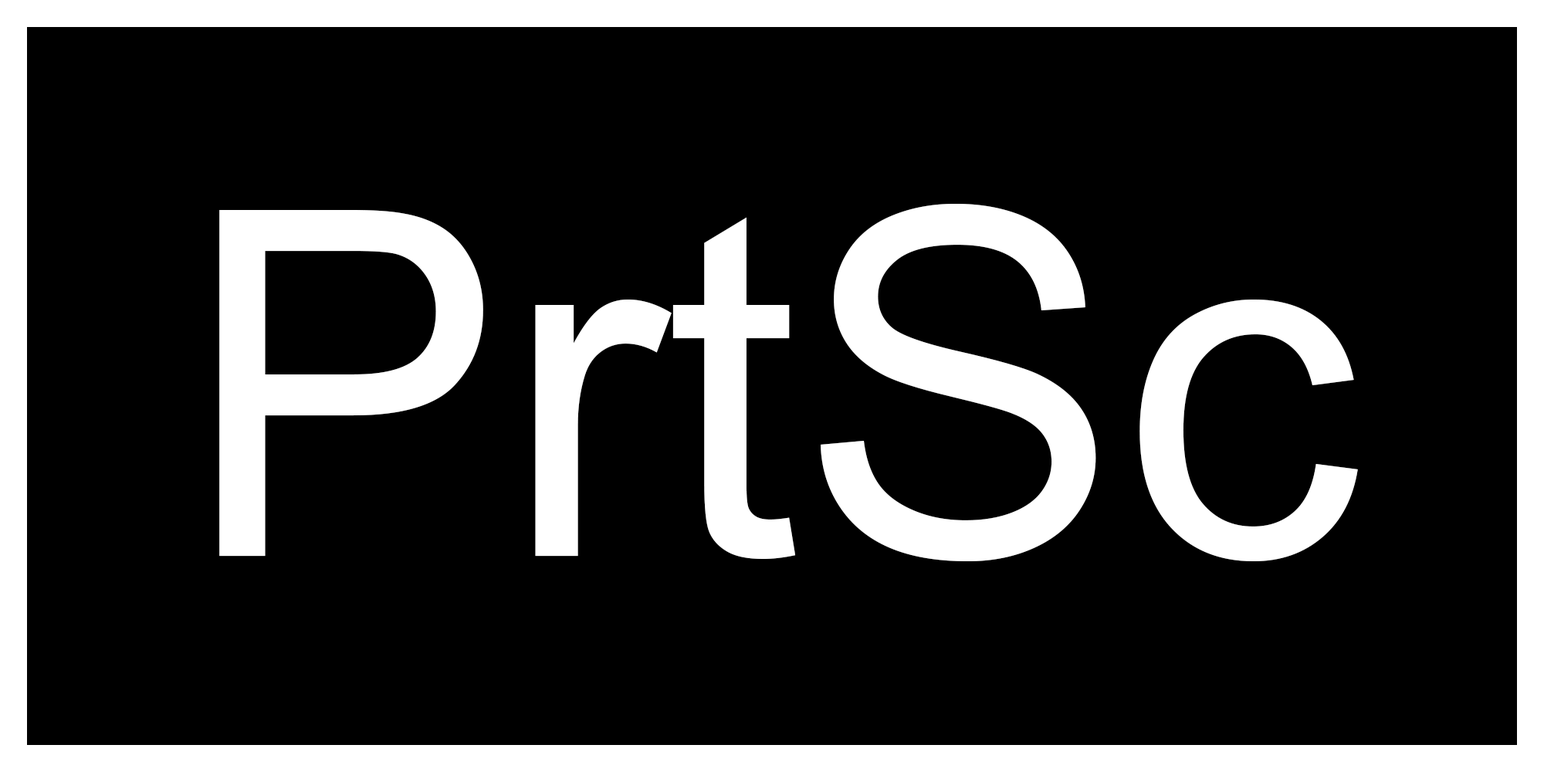
<style>
.page{position:relative;width:1544px;height:772px;background:#000000}
.page>*{position:absolute;margin:0}
.t1{font:482.6px "ArialMT";color:#ffffff}
</style>
<div class="page">
<p class="t1" style="left:219px;top:204px;width:1139px;height:357px">PrtSc</p>
</div>
